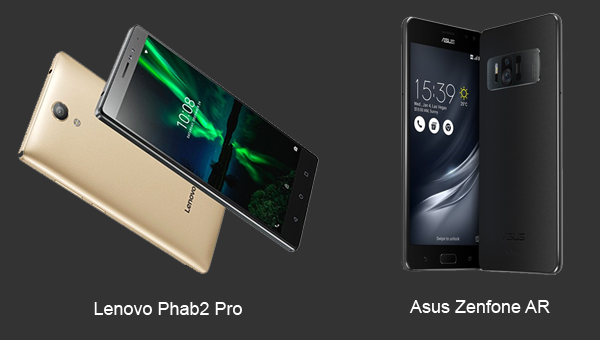
<style>
.page{position:relative;width:600px;height:340px;background:#333333}
.page>*{position:absolute;margin:0}
.t1{font:18px "ArialMT";color:#ffffff}
</style>
<div class="page">
<p class="t1" style="left:94px;top:302px;width:148px;height:13px">Lenovo Phab2 Pro</p>
<p class="t1" style="left:409px;top:300px;width:141px;height:13px">Asus Zenfone AR</p>
</div>
